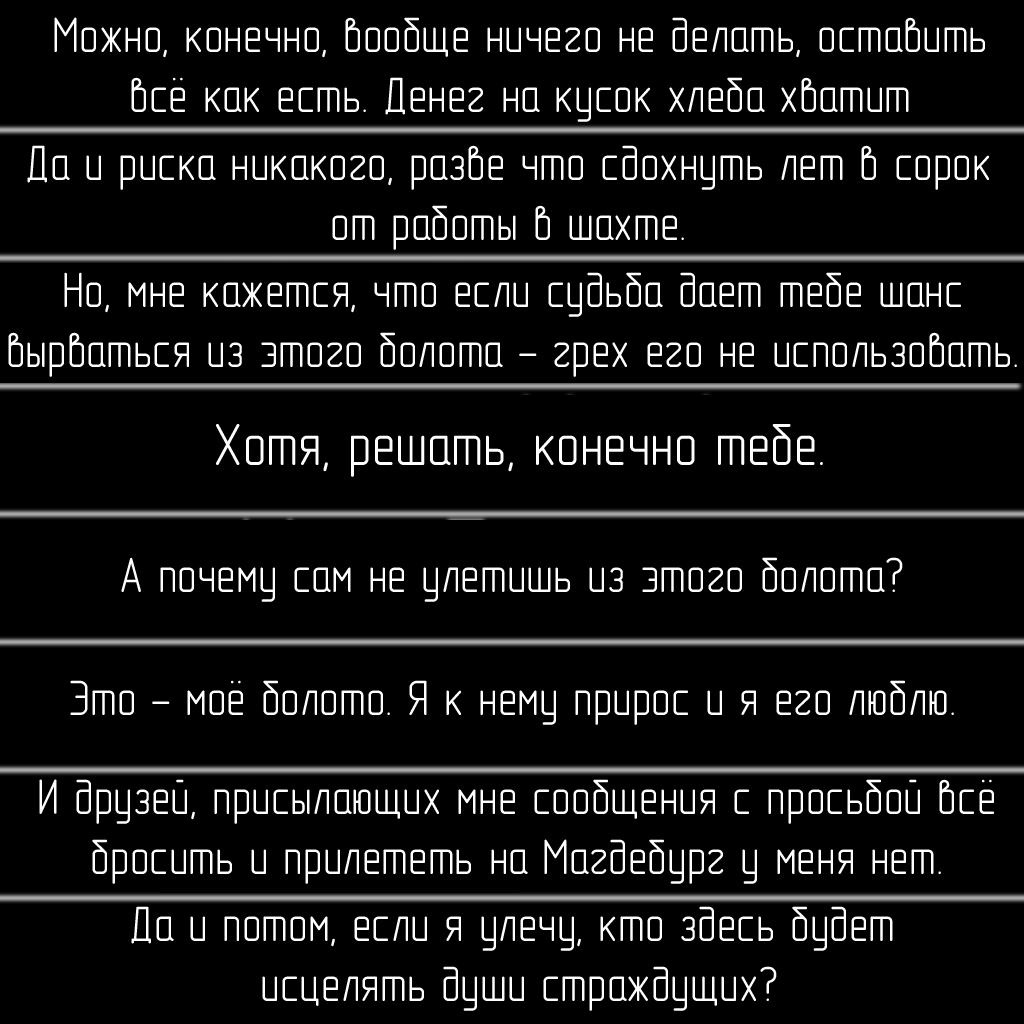
<style>
.page{position:relative;width:1024px;height:1024px;background:#000000}
.page>*{position:absolute;margin:0}
.t1{font:50px "GOST-2.304-81typeA";color:#ffffff}
.t2{font:60px "GOST-2.304-81typeA";color:#ffffff}
</style>
<div class="page">
<p class="t1" style="left:54px;top:17px;width:931px;height:105px;text-align:center">Можно, конечно, вообще ничего не делать, оставить<br>всё как есть. Денег на кусок хлеба хватит</p>
<p class="t1" style="left:27px;top:145px;width:963px;height:105px;text-align:center">Да и риска никакого, разве что сдохнуть лет в сорок<br>от работы в шахте.</p>
<p class="t1" style="left:8px;top:272px;width:1009px;height:105px;text-align:center">Но, мне кажется, что если судьба дает тебе шанс<br>вырваться из этого болота - грех его не использовать.</p>
<p class="t2" style="left:216px;top:424px;width:607px;height:53px">Хотя, решать, конечно тебе.</p>
<p class="t1" style="left:121px;top:557px;width:782px;height:45px">А почему сам не улетишь из этого болота?</p>
<p class="t1" style="left:70px;top:680px;width:884px;height:45px">Это - моё болото. Я к нему прирос и я его люблю.</p>
<p class="t1" style="left:39px;top:779px;width:955px;height:105px;text-align:center">И друзей, присылающих мне сообщения с просьбой всё<br>бросить и прилететь на Магдебург у меня нет.</p>
<p class="t1" style="left:131px;top:906px;width:762px;height:105px;text-align:center">Да и потом, если я улечу, кто здесь будет<br> исцелять души страждущих?</p>
</div>
